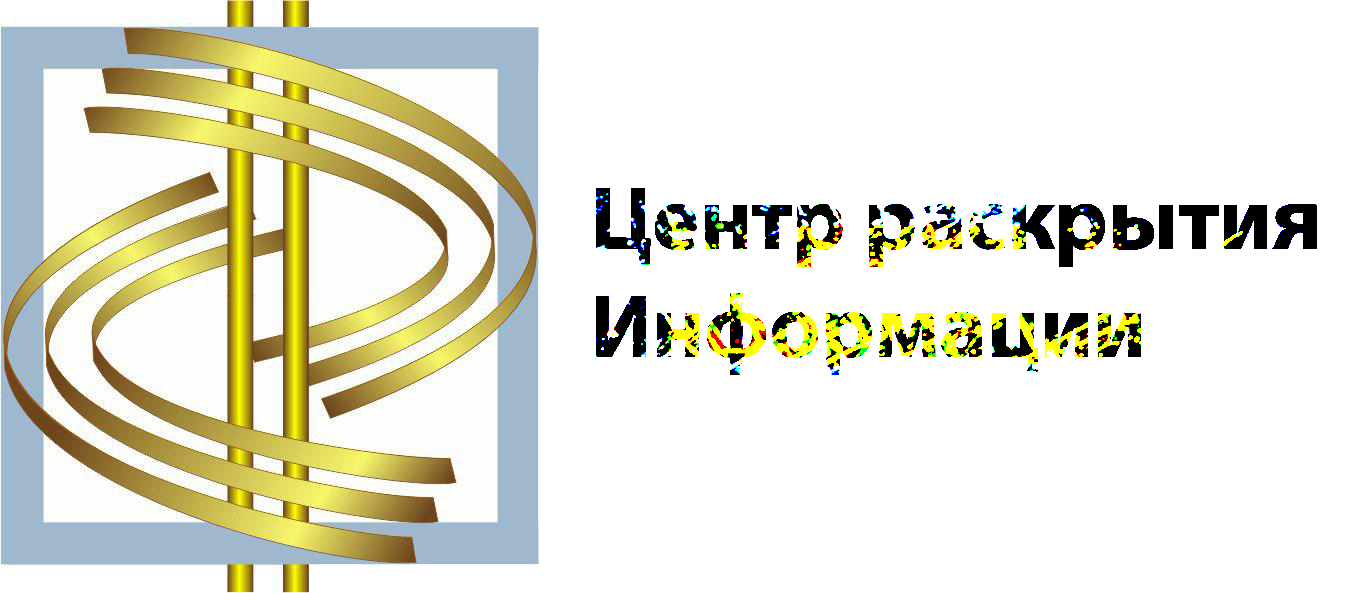
<style>
.page{position:relative;width:1358px;height:593px;background:#ffffff}
.page>*{position:absolute;margin:0}
.t1{font:90px "MyriadPro-Bold"}
</style>
<div class="page">
<p class="t1" style="left:596px;top:188px;width:721px;height:187px">Центр раскрытия<br>Информации</p>
</div>
